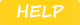
<style>
.page{position:relative;width:80px;height:25px}
.page>*{position:absolute;margin:0}
.t1{font:16px "SegoeScript-Bold";color:#ffffff}
</style>
<div class="page">
<p class="t1" style="left:17px;top:4px;width:47px;height:14px">HELP</p>
</div>
